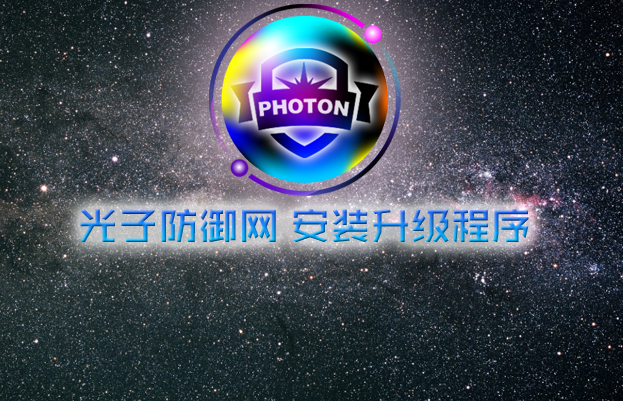
<style>
.page{position:relative;width:623px;height:401px}
.page>*{position:absolute;margin:0}
.t1{font:40.2px "ZHSRXT--GBK1-0"}
</style>
<div class="page">
<p class="t1" style="left:80px;top:208px;width:449px;height:35px">光子防御网 安装升级程序</p>
</div>
